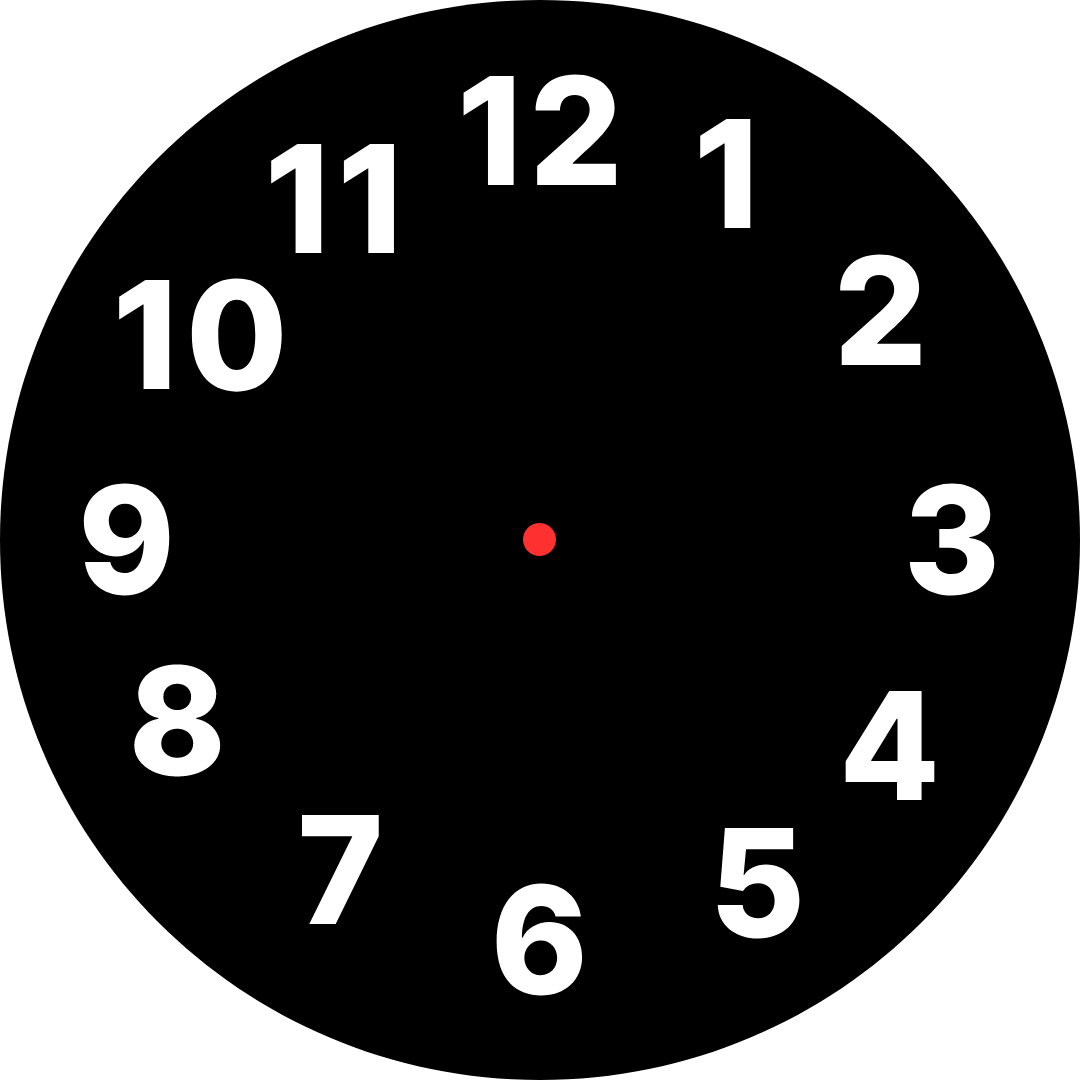
<style>
.page{position:relative;width:1080px;height:1080px;background:#000000}
.page>*{position:absolute;margin:0}
.t1{font:150px "Inter-ExtraBold";color:#ffffff}
</style>
<div class="page">
<p class="t1" style="left:463px;top:74px;width:153px;height:111px">12</p>
<p class="t1" style="left:700px;top:119px;width:51px;height:109px">1</p>
<p class="t1" style="left:271px;top:144px;width:123px;height:109px">11</p>
<p class="t1" style="left:840px;top:254px;width:81px;height:111px">2</p>
<p class="t1" style="left:119px;top:278px;width:163px;height:114px">10</p>
<p class="t1" style="left:83px;top:483px;width:87px;height:113px">9</p>
<p class="t1" style="left:909px;top:483px;width:86px;height:113px">3</p>
<p class="t1" style="left:134px;top:664px;width:87px;height:113px">8</p>
<p class="t1" style="left:845px;top:691px;width:90px;height:109px">4</p>
<p class="t1" style="left:302px;top:815px;width:77px;height:109px">7</p>
<p class="t1" style="left:717px;top:828px;width:83px;height:111px">5</p>
<p class="t1" style="left:496px;top:883px;width:87px;height:113px">6</p>
</div>
